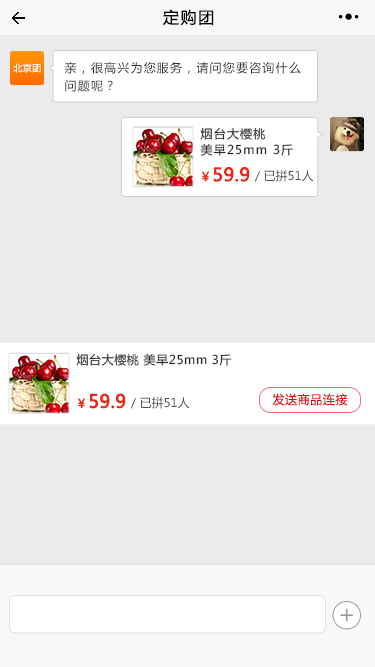
<style>
.page{position:relative;width:375px;height:667px;background:#ebebeb}
.page>*{position:absolute;margin:0}
.t1{font:16px "MicrosoftYaHei";letter-spacing:0.1em;color:#020202}
.t2{font:9px "MicrosoftYaHei";letter-spacing:0.05em;color:#ffffff}
.t3{font:12px/18px "MicrosoftYaHei";letter-spacing:0.1em;color:#333333}
.t4{font:12px/16px "MicrosoftYaHei";letter-spacing:0.1em;color:#272727}
.t5{font:12px "MicrosoftYaHei";letter-spacing:0.05em;color:#ea2919;font-weight:bold}
.t6{font:18px "MicrosoftYaHei";color:#ea2919;font-weight:bold}
.t7{font:12px "MicrosoftYaHei";color:#505050}
.t8{font:12px "MicrosoftYaHei";letter-spacing:0.05em;color:#272727}
.t9{font:12px "MicrosoftYaHei";letter-spacing:0.05em;color:#d41218}
</style>
<div class="page">
<p class="t1" style="left:163px;top:9px;width:51px;height:17px">定购团</p>
<p class="t2" style="left:13px;top:63px;width:28px;height:10px">北京团</p>
<p class="t3" style="left:64px;top:62px;width:237px;height:30px">亲，很高兴为您服务，请问您要咨询什么<br>问题呢？</p>
<p class="t4" style="left:200px;top:127px;width:94px;height:29px">烟台大樱桃 <br>美早25mm 3斤</p>
<p class="t5" style="left:202px;top:171px;width:7px;height:11px">￥</p>
<p class="t6" style="left:213px;top:167px;width:37px;height:15px">59.9</p>
<p class="t7" style="left:254px;top:170px;width:60px;height:12px">／已拼51人</p>
<p class="t8" style="left:76px;top:353px;width:156px;height:13px">烟台大樱桃 美早25mm 3斤</p>
<p class="t5" style="left:78px;top:398px;width:7px;height:10px">￥</p>
<p class="t6" style="left:89px;top:393px;width:37px;height:16px">59.9</p>
<p class="t7" style="left:130px;top:397px;width:60px;height:12px">／已拼51人</p>
<p class="t9" style="left:272px;top:393px;width:76px;height:13px">发送商品连接</p>
</div>
